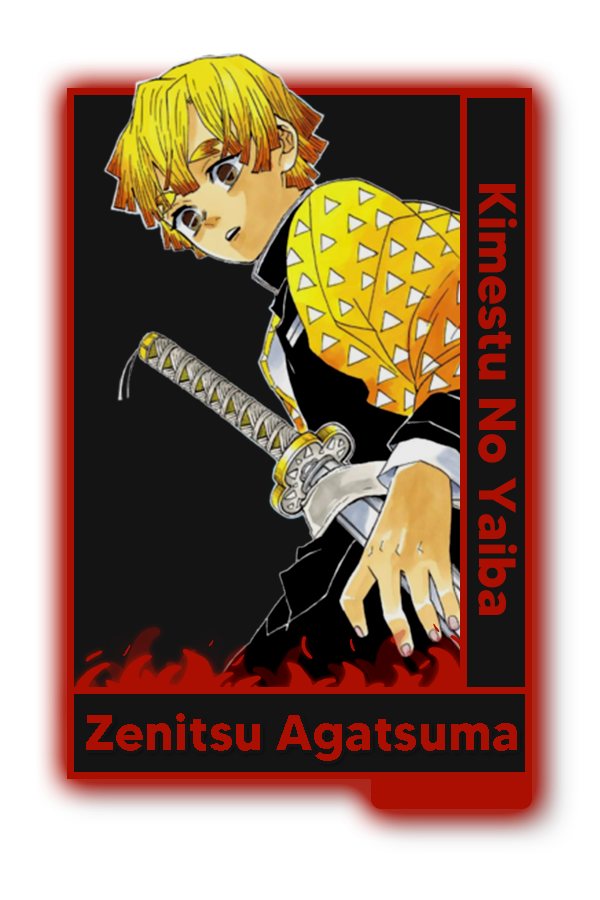
<style>
.page{position:relative;width:600px;height:900px;background:#141414}
.page>*{position:absolute;margin:0}
.t1{font:52px "MADETOMMY-Bold";color:#ab0f01}
.t2{font:50.5px "MADETOMMY-Bold";color:#ab0f01}
</style>
<div class="page">
<p class="t1" style="left:478px;top:184px;width:40px;height:431px;rotate:90deg">Kimestu No Yaiba</p>
<p class="t2" style="left:86px;top:713px;width:431px;height:48px">Zenitsu Agatsuma</p>
</div>
